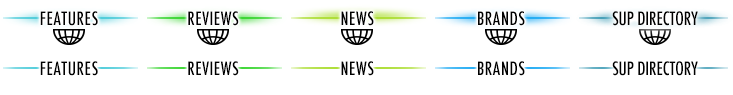
<style>
.page{position:relative;width:733px;height:95px;background:#ffffff}
.page>*{position:absolute;margin:0}
.t1{font:18px "Futura-CondensedMedium";letter-spacing:0.025em;color:#000000;text-transform:uppercase}
.t2{font:18px "Futura-CondensedMedium";letter-spacing:-0.01em;color:#000000;text-transform:uppercase}
</style>
<div class="page">
<p class="t1" style="left:40px;top:11px;width:58px;height:15px">features</p>
<p class="t1" style="left:188px;top:11px;width:51px;height:15px">Reviews</p>
<p class="t1" style="left:341px;top:11px;width:33px;height:15px">News</p>
<p class="t1" style="left:478px;top:11px;width:47px;height:15px">Brands</p>
<p class="t2" style="left:612px;top:11px;width:86px;height:15px">SUP Directory</p>
<p class="t1" style="left:40px;top:61px;width:58px;height:15px">features</p>
<p class="t1" style="left:188px;top:61px;width:51px;height:15px">Reviews</p>
<p class="t1" style="left:341px;top:61px;width:33px;height:15px">News</p>
<p class="t1" style="left:478px;top:61px;width:47px;height:15px">Brands</p>
<p class="t2" style="left:612px;top:61px;width:86px;height:15px">SUP Directory</p>
</div>
